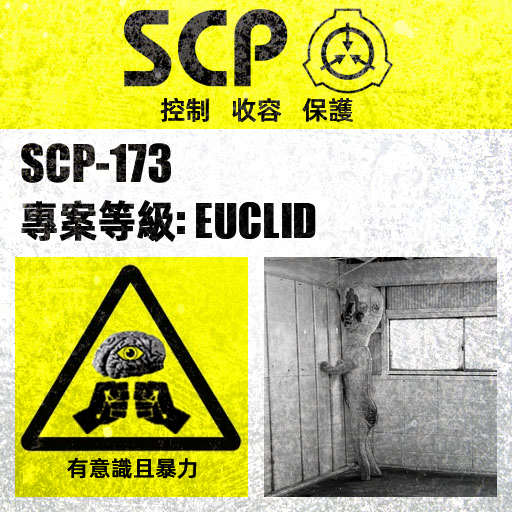
<style>
.page{position:relative;width:512px;height:512px}
.page>*{position:absolute;margin:0}
.t1{font:26px "AlibabaPuHuiTiM"}
.t2{font:52px "URWImpactW01-Bold";letter-spacing:0.02em;color:#000000}
.t3{font:44px "AlibabaPuHuiTiB";letter-spacing:-0.02em;color:#000000;font-weight:bold;scale:0.9 1}
.t4{font:62px "URWImpactW01-Bold";color:#000000}
.t5{font:22px "AlibabaPuHuiTiM";letter-spacing:0.02em;color:#000000}
</style>
<div class="page">
<p class="t1" style="left:160px;top:97px;width:193px;height:26px">控制   收容   保護</p>
<p class="t2" style="left:21px;top:200px;width:295px;height:42px"><span class="t3">專案等級</span><span class="t4">: </span>EUCLID</p>
<p class="t5" style="left:67px;top:458px;width:130px;height:21px">有意識且暴力</p>
</div>
